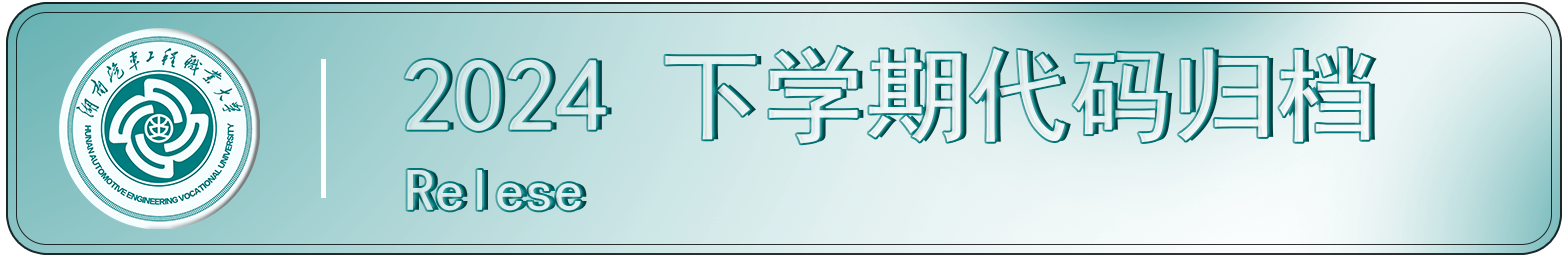
<style>
.page{position:relative;width:1568px;height:256px}
.page>*{position:absolute;margin:0}
.t1{font:102.8px "SimHei";color:#e6f1f1}
.t2{font:59.7px "SimHei";color:#daebec}
</style>
<div class="page">
<p class="t1" style="left:405px;top:46px;width:966px;height:98px">2024 下学期代码归档</p>
<p class="t2" style="left:407px;top:170px;width:174px;height:41px">Relese</p>
</div>
